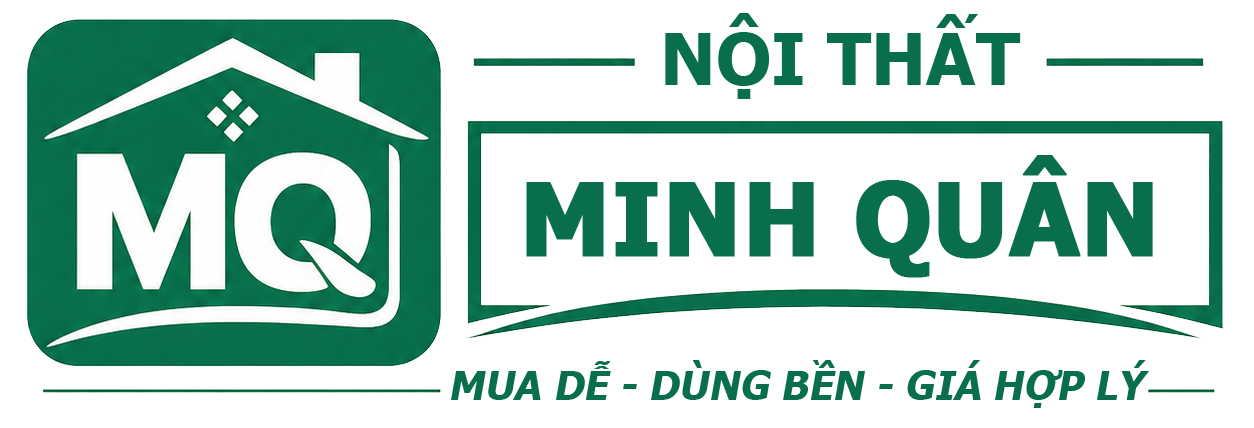
<style>
.page{position:relative;width:1254px;height:428px;background:#ffffff}
.page>*{position:absolute;margin:0}
.t1{font:72px "Tahoma-Bold";color:#096e4c}
.t2{font:100px "Tahoma-Bold";color:#096e4c;font-weight:bold}
.t3{font:40px "Tahoma-Bold";color:#096e4c;text-transform:uppercase;font-style:italic}
</style>
<div class="page">
<p class="t1" style="left:665px;top:13px;width:356px;height:86px">NỘI THẤT</p>
<p class="t2" style="left:526px;top:155px;width:627px;height:123px">MINH QUÂN</p>
<p class="t3" style="left:451px;top:360px;width:698px;height:48px">Mua dễ - Dùng bền - Giá hợp lý</p>
</div>
